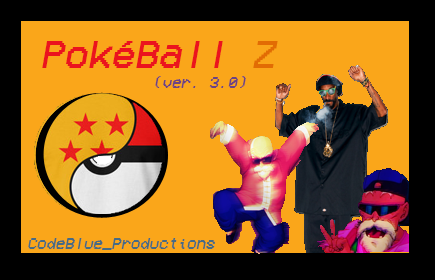
<style>
.page{position:relative;width:435px;height:280px;background:#faa61a}
.page>*{position:absolute;margin:0}
.t1{font:16px "VCROSDMono";color:#6c4383;font-style:italic}
.t2{font:40px "VCROSDMono";color:#eb131e;font-style:italic}
.t3{font:40px "VCROSDMono";color:#e26c04;font-style:italic}
.t4{font:16px "VCROSDMono";color:#476b84;font-style:italic}
</style>
<div class="page">
<p class="t1" style="left:42px;top:41px;width:236px;height:47px"><span class="t2">PokéBall </span><span class="t3">Z  <br></span>            (ver. 3.0)</p>
<p class="t4" style="left:28px;top:238px;width:187px;height:12px">CodeBlue_Productions</p>
</div>
